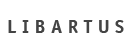
<style>
.page{position:relative;width:129px;height:53px;background:#ffffff}
.page>*{position:absolute;margin:0}
.t1{font:18.8px "OfficinaSansLT-Bold";color:#444444}
</style>
<div class="page">
<p class="t1" style="left:8px;top:20px;width:116px;height:13px">L I B A R T U S</p>
</div>
